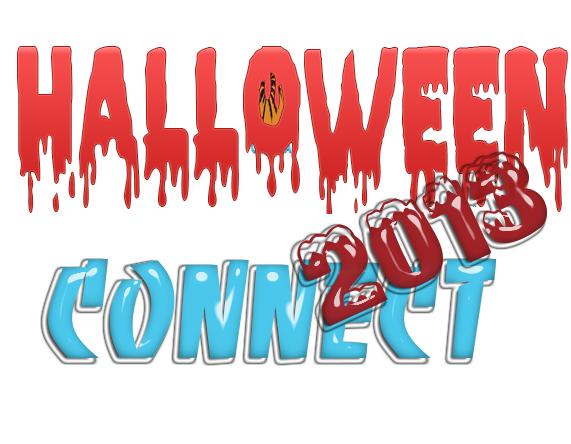
<style>
.page{position:relative;width:571px;height:444px;background:#ffffff}
.page>*{position:absolute;margin:0}
.t1{font:112.9px "Ice-Snow";color:#9d2327;scale:1.13 1}
.t2{font:127.1px "VNI-Jamai";scale:0.87 1}
</style>
<div class="page">
<p class="t1" style="left:297px;top:151px;width:251px;height:176px;rotate:-24deg">2013</p>
<p class="t2" style="left:48px;top:259px;width:449px;height:100px">CONNECT</p>
</div>
